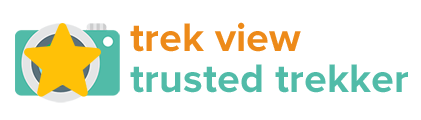
<style>
.page{position:relative;width:421px;height:120px;background:#ffffff}
.page>*{position:absolute;margin:0}
.t1{font:41.1px/41.1px "ProximaNova-Bold";color:#51bba8}
.t2{font:41.1px/41.1px "ProximaNova-Bold";color:#ed8a19}
</style>
<div class="page">
<p class="t1" style="left:130px;top:22px;width:278px;height:71px"><span class="t2">trek view<br></span>trusted trekker</p>
</div>
